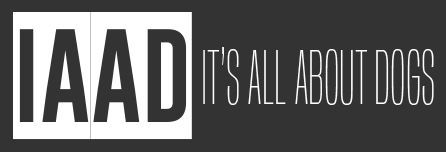
<style>
.page{position:relative;width:446px;height:152px;background:#333333}
.page>*{position:absolute;margin:0}
.t1{font:125px "GoboldBlocky";color:#ffffff}
.t2{font:70.8px "BuiltTitlingEl-Regular";color:#ffffff}
</style>
<div class="page">
<p class="t1" style="left:13px;top:12px;width:179px;height:128px">IAAD</p>
<p class="t2" style="left:203px;top:47px;width:231px;height:58px">IT’s All About DOGS</p>
</div>
